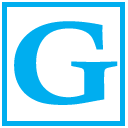
<style>
.page{position:relative;width:128px;height:128px;background:#ffffff}
.page>*{position:absolute;margin:0}
.t1{font:115.7px "CalisMTBol";color:#00aeef;scale:1.12 1}
</style>
<div class="page">
<p class="t1" style="left:14px;top:21px;width:104px;height:84px">G</p>
</div>
